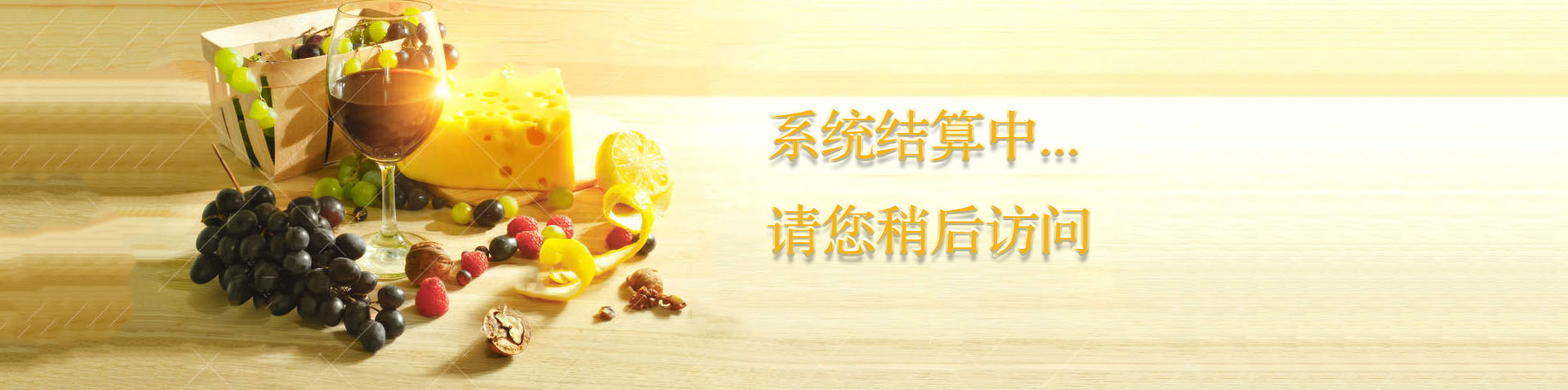
<style>
.page{position:relative;width:1568px;height:390px}
.page>*{position:absolute;margin:0}
.t1{font:54.4px "FZS3JW--GB1-0";color:#f7b313}
</style>
<div class="page">
<p class="t1" style="left:767px;top:109px;width:322px;height:147px">系统结算中... <br>请您稍后访问</p>
</div>
